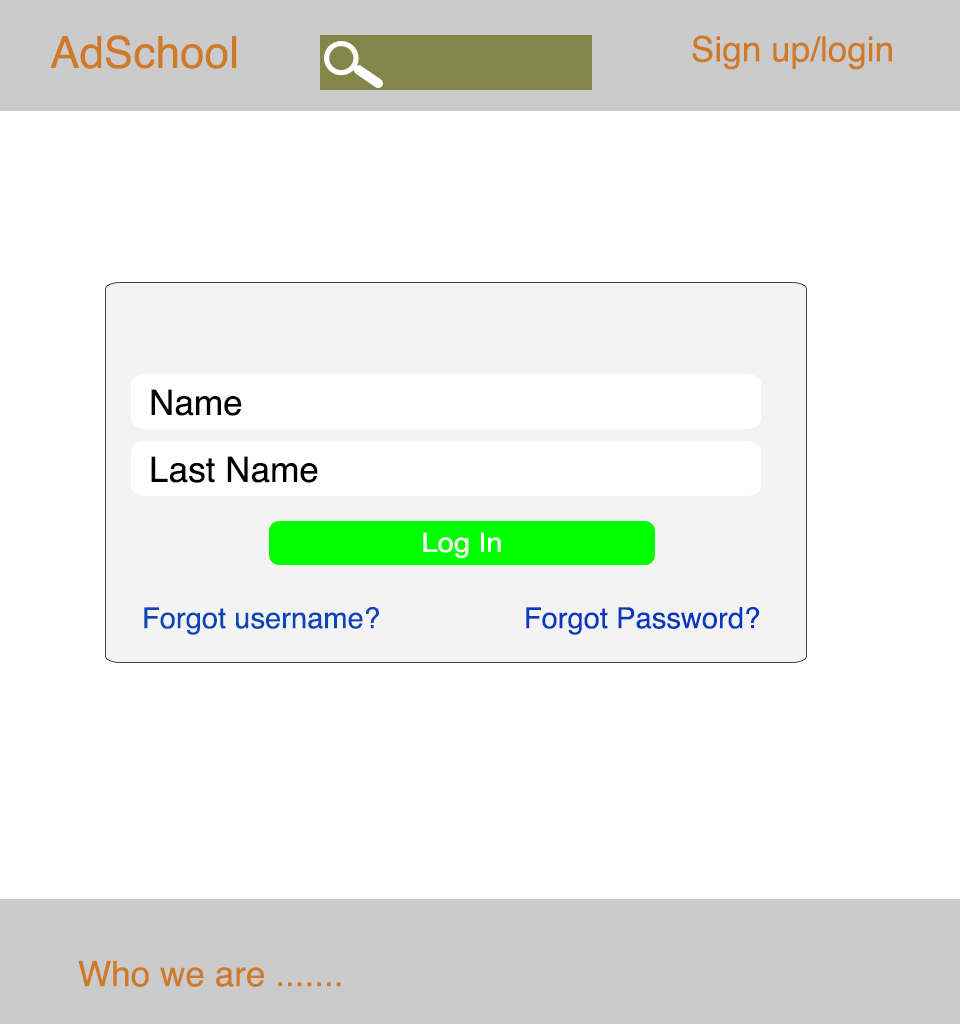
<style>
.page{position:relative;width:960px;height:1024px;background:#ffffff}
.page>*{position:absolute;margin:0}
.t1{font:44px "Helvetica";color:#cf7a29}
.t2{font:35.1px "Helvetica";color:#cf7a29}
.t3{font:35.1px "Helvetica";color:#000000}
.t4{font:26.7px "Helvetica";color:#ffffff;scale:1.09 1}
.t5{font:29.1px "Helvetica";color:#0a47b6}
.t6{font:29.1px "Helvetica";color:#0938be}
</style>
<div class="page">
<p class="t1" style="left:50px;top:35px;width:187px;height:34px">AdSchool</p>
<p class="t2" style="left:692px;top:35px;width:200px;height:35px">Sign up/login</p>
<p class="t3" style="left:151px;top:389px;width:91px;height:27px">Name</p>
<p class="t3" style="left:151px;top:456px;width:167px;height:27px">Last Name</p>
<p class="t4" style="left:423px;top:532px;width:78px;height:26px">Log In</p>
<p class="t5" style="left:144px;top:607px;width:235px;height:28px">Forgot username?</p>
<p class="t6" style="left:526px;top:607px;width:234px;height:28px">Forgot Password?</p>
<p class="t2" style="left:78px;top:960px;width:263px;height:27px">Who we are .......</p>
</div>
